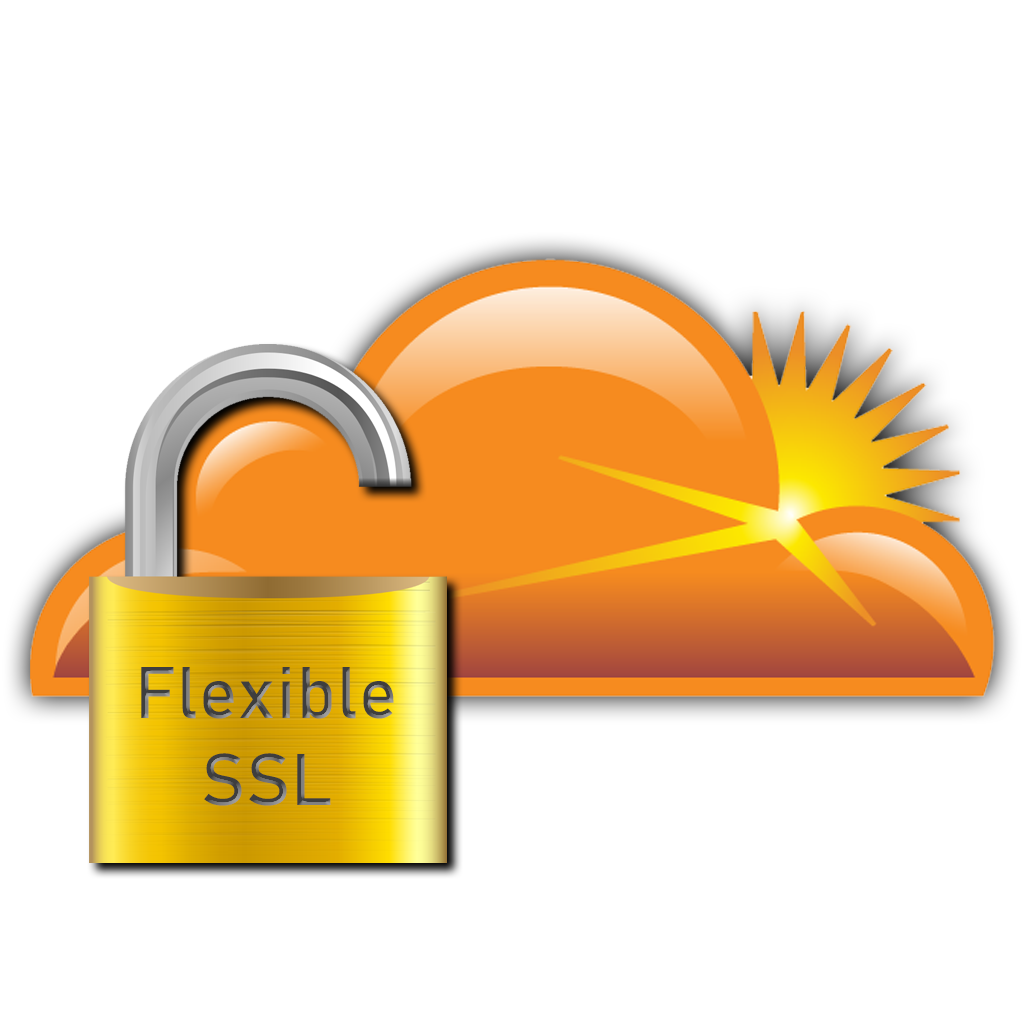
<style>
.page{position:relative;width:1024px;height:1024px;background:#ffffff}
.page>*{position:absolute;margin:0}
.t1{font:72px "Bahnschrift";letter-spacing:0.02em}
</style>
<div class="page">
<p class="t1" style="left:141px;top:667px;width:253px;height:139px;text-align:center">Flexible<br>SSL</p>
</div>
